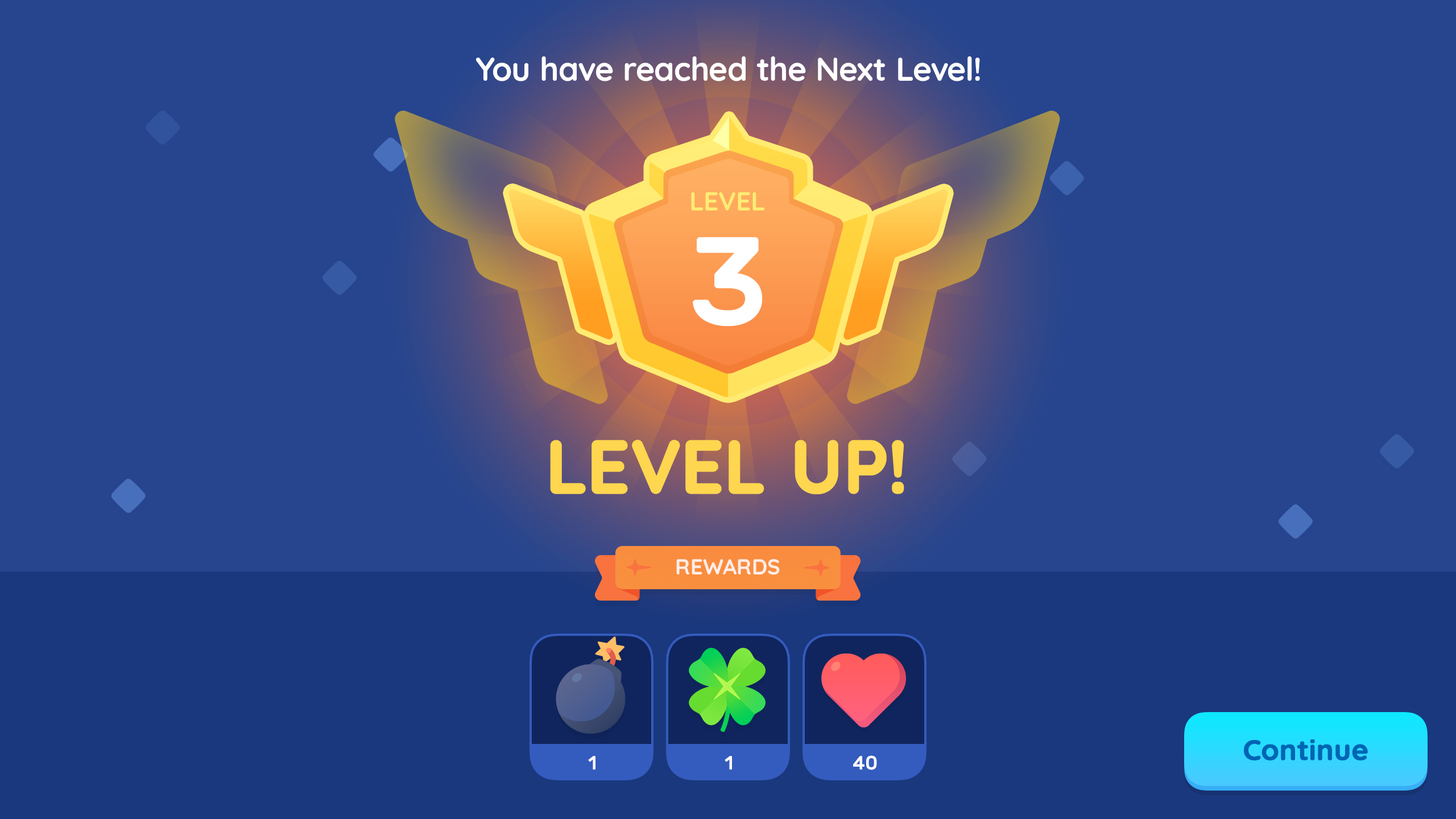
<style>
.page{position:relative;width:1456px;height:819px;background:#26458e}
.page>*{position:absolute;margin:0}
.t1{font:33px "Quicksand-Bold";color:#ffffff}
.t2{font:26.2px "Quicksand-Bold";color:#ffec74;text-transform:uppercase}
.t3{font:125.1px "Rubik-Medium";letter-spacing:-0.01em;color:#ffffff}
.t4{font:73.9px "Quicksand-Bold";color:#ffd64f;text-transform:uppercase;font-weight:bold}
.t5{font:21.6px "Quicksand-Bold";letter-spacing:0.01em;color:#ffffff;text-transform:uppercase}
.t6{font:28.4px "Quicksand-Bold";color:#0065b4;font-weight:bold}
.t7{font:19.3px "Rubik-Medium";letter-spacing:-0.01em;color:#ffffff}
</style>
<div class="page">
<p class="t1" style="left:476px;top:56px;width:504px;height:25px">You have reached the Next Level!</p>
<p class="t2" style="left:691px;top:192px;width:73px;height:18px">Level</p>
<p class="t3" style="left:693px;top:237px;width:69px;height:89px">3</p>
<p class="t4" style="left:550px;top:440px;width:354px;height:54px">Level Up!</p>
<p class="t5" style="left:676px;top:559px;width:104px;height:16px">Rewards</p>
<p class="t6" style="left:1244px;top:739px;width:124px;height:21px">Continue</p>
<p class="t7" style="left:588px;top:756px;width:7px;height:14px">1</p>
<p class="t7" style="left:725px;top:756px;width:7px;height:14px">1</p>
<p class="t7" style="left:853px;top:755px;width:24px;height:15px">40</p>
</div>
